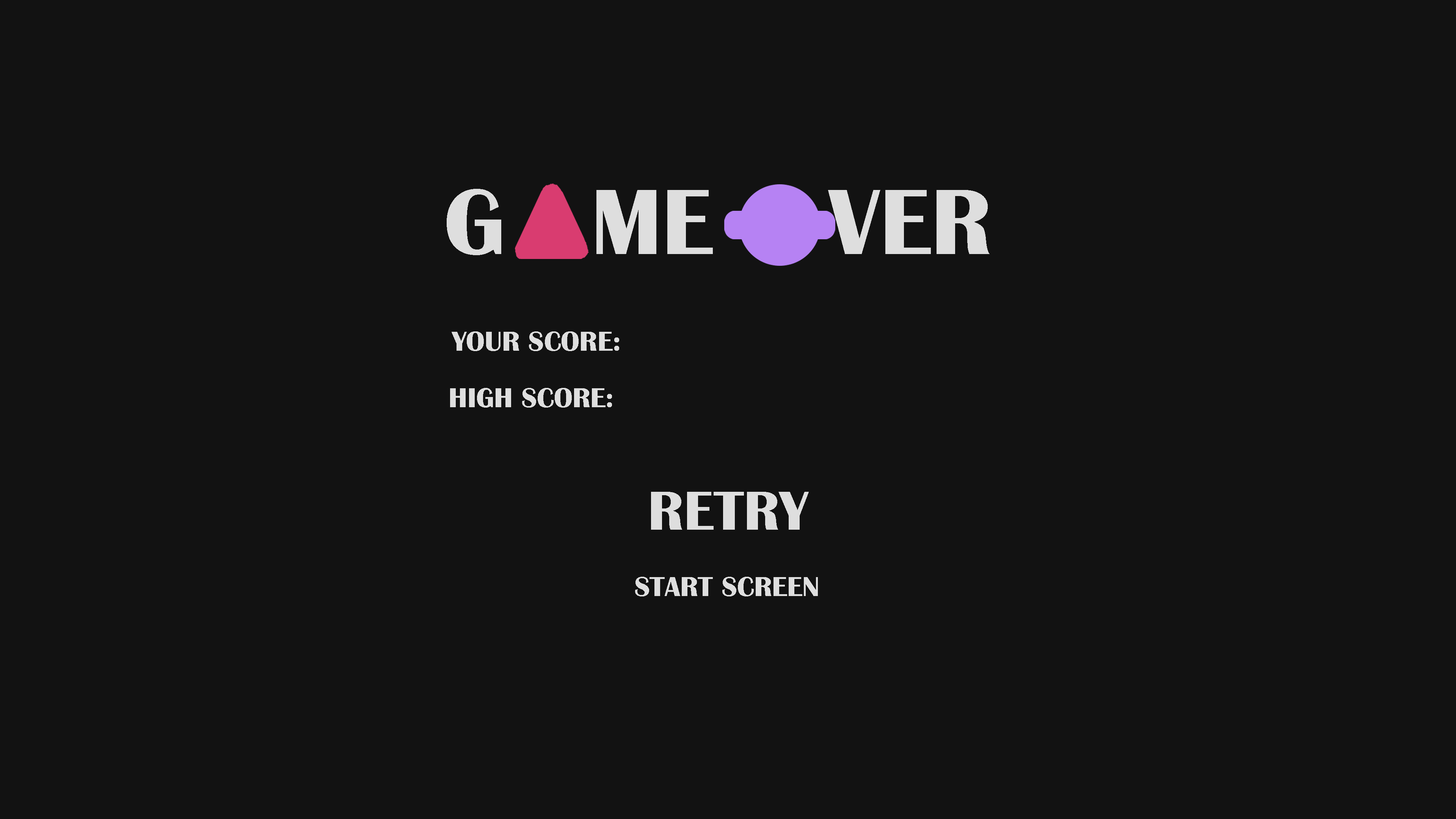
<style>
.page{position:relative;width:1456px;height:819px;background:#121212}
.page>*{position:absolute;margin:0}
.t1{font:96.2px "BritannicBold";color:#dedede}
.t2{font:28.4px "BritannicBold";color:#dedede}
.t3{font:56.9px "BritannicBold";color:#dedede}
</style>
<div class="page">
<p class="t1" style="left:447px;top:189px;width:543px;height:66px">G   ME    VER</p>
<p class="t2" style="left:452px;top:331px;width:167px;height:20px">YOUR SCORE:</p>
<p class="t2" style="left:450px;top:388px;width:162px;height:20px">HIGH SCORE:</p>
<p class="t3" style="left:651px;top:492px;width:158px;height:38px">RETRY</p>
<p class="t2" style="left:635px;top:577px;width:183px;height:19px">START SCREEN</p>
</div>
